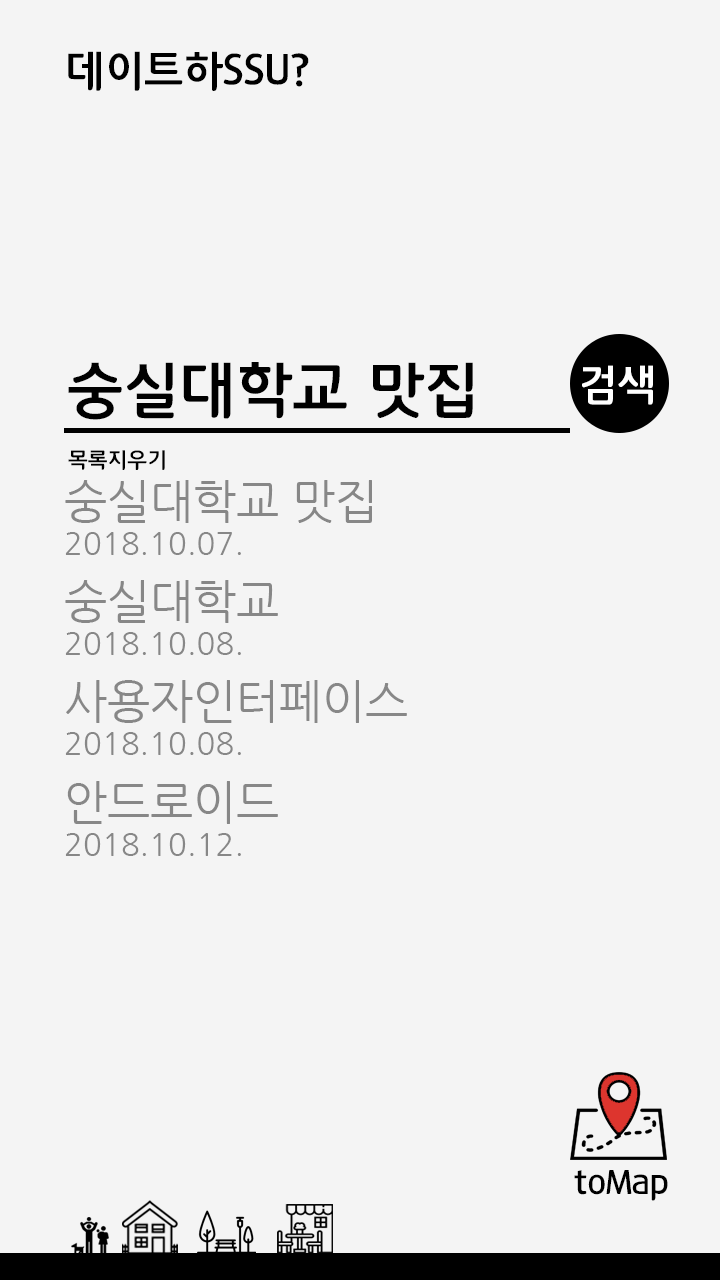
<style>
.page{position:relative;width:720px;height:1280px;background:#f4f4f4}
.page>*{position:absolute;margin:0}
.t1{font:43.8px "12LotteMartDreamBold";color:#000000}
.t2{font:62.5px "12LotteMartDreamBold";color:#000000}
.t3{font:22px "12LotteMartDreamBold";color:#000000}
.t4{font:31.2px/45.7px "NanumGothic";color:#878787}
.t5{font:45.7px/45.7px "NanumGothic";color:#878787}
.t6{font:34.5px "12LotteMartDreamBold";color:#000000}
</style>
<div class="page">
<p class="t1" style="left:68px;top:51px;width:241px;height:40px">데이트하SSU?</p>
<p class="t2" style="left:68px;top:362px;width:405px;height:58px">숭실대학교 맛집</p>
<p class="t3" style="left:68px;top:450px;width:97px;height:20px">목록지우기</p>
<p class="t4" style="left:65px;top:480px;width:307px;height:75px"><span class="t5">숭실대학교 맛집<br></span>2018.10.07.</p>
<p class="t4" style="left:65px;top:580px;width:213px;height:75px"><span class="t5">숭실대학교<br></span>2018.10.08.</p>
<p class="t4" style="left:65px;top:680px;width:342px;height:75px"><span class="t5">사용자인터페이스<br></span>2018.10.08.</p>
<p class="t4" style="left:65px;top:781px;width:213px;height:75px"><span class="t5">안드로이드<br></span>2018.10.12.</p>
<p class="t6" style="left:574px;top:1170px;width:94px;height:31px">toMap</p>
</div>
